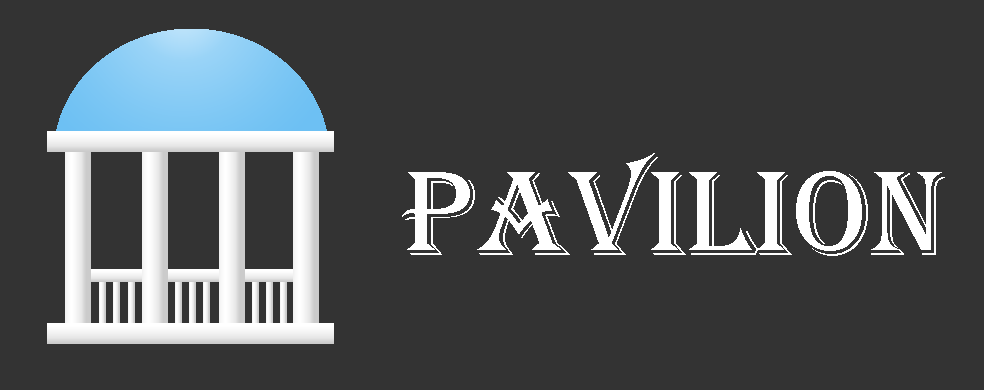
<style>
.page{position:relative;width:984px;height:390px;background:#333333}
.page>*{position:absolute;margin:0}
.t1{font:125px "Algerian";color:#ffffff}
</style>
<div class="page">
<p class="t1" style="left:402px;top:153px;width:543px;height:103px">PAVILION</p>
</div>
